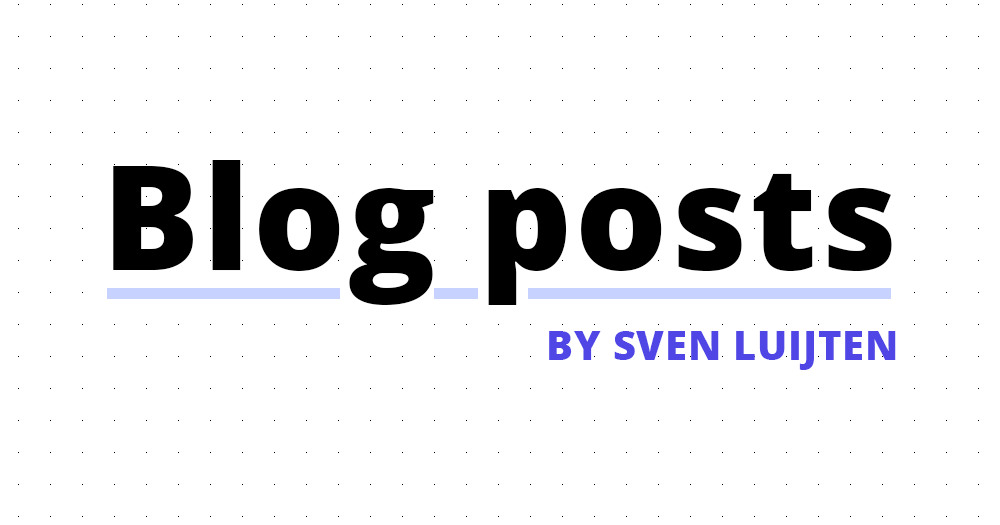
<style>
.page{position:relative;width:1000px;height:525px;background:#ffffff}
.page>*{position:absolute;margin:0}
.t1{font:144.8px "OpenSans-Extrabold";letter-spacing:0.02em;color:#000000}
.t2{font:40px "OpenSans-Extrabold";letter-spacing:0.02em;color:#4f46e5}
</style>
<div class="page">
<p class="t1" style="left:113px;top:160px;width:779px;height:145px">Blog posts</p>
<p class="t2" style="left:549px;top:331px;width:347px;height:39px">BY SVEN LUIJTEN</p>
</div>
